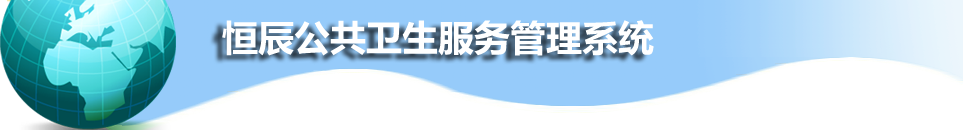
<style>
.page{position:relative;width:963px;height:130px;background:#ffffff}
.page>*{position:absolute;margin:0}
.t1{font:36px "MicrosoftYaHei-Bold";color:#ffffff}
</style>
<div class="page">
<p class="t1" style="left:222px;top:20px;width:432px;height:36px">恒辰公共卫生服务管理系统</p>
</div>
